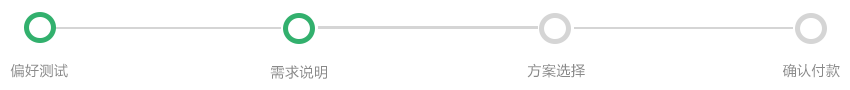
<style>
.page{position:relative;width:850px;height:90px;background:#ffffff}
.page>*{position:absolute;margin:0}
.t1{font:13.9px "MicrosoftYaHei";letter-spacing:0.04em;color:#8a8a8a}
</style>
<div class="page">
<p class="t1" style="left:10px;top:63px;width:58px;height:15px">偏好测试</p>
<p class="t1" style="left:270px;top:65px;width:57px;height:14px">需求说明</p>
<p class="t1" style="left:527px;top:63px;width:58px;height:15px">方案选择</p>
<p class="t1" style="left:783px;top:63px;width:57px;height:15px">确认付款</p>
</div>
